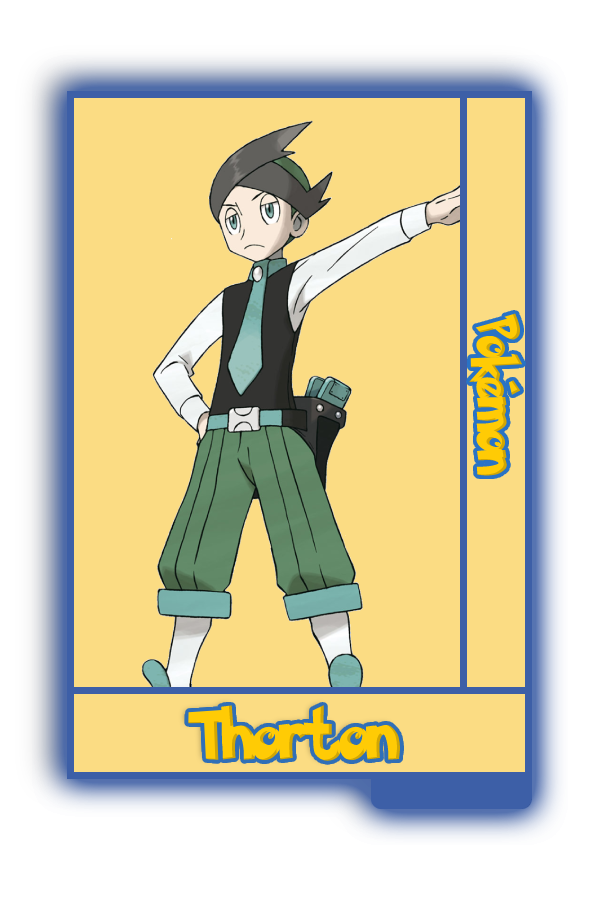
<style>
.page{position:relative;width:600px;height:900px;background:#fbdc83}
.page>*{position:absolute;margin:0}
.t1{font:48.8px "PokemonSolidNormal";color:#ffcb05;scale:0.8 1}
.t2{font:56.6px "PokemonSolidNormal";color:#ffcb05;scale:0.92 1}
</style>
<div class="page">
<p class="t1" style="left:469px;top:313px;width:54px;height:163px;rotate:90deg">Pokémon</p>
<p class="t2" style="left:188px;top:705px;width:213px;height:56px">Thorton</p>
</div>
